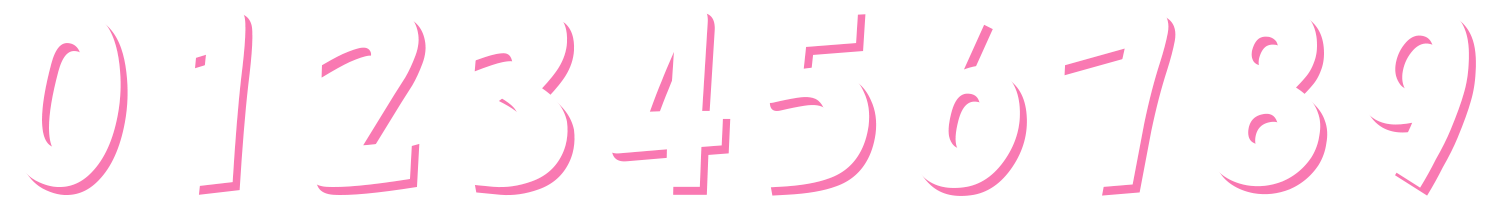
<style>
.page{position:relative;width:1500px;height:200px;background:#ffffff}
.page>*{position:absolute;margin:0}
.t1{font:200px "HGPSoeiKakupoptai";color:#ffffff}
</style>
<div class="page">
<p class="t1" style="left:6px;top:5px;width:115px;height:182px">0</p>
<p class="t1" style="left:188px;top:5px;width:58px;height:182px">1</p>
<p class="t1" style="left:308px;top:5px;width:111px;height:182px">2</p>
<p class="t1" style="left:604px;top:4px;width:120px;height:183px">4</p>
<p class="t1" style="left:758px;top:6px;width:112px;height:182px">5</p>
<p class="t1" style="left:1206px;top:2px;width:115px;height:185px">8</p>
<p class="t1" style="left:1356px;top:2px;width:113px;height:186px">9</p>
<p class="t1" style="left:460px;top:8px;width:108px;height:180px">3</p>
<p class="t1" style="left:1064px;top:14px;width:112px;height:182px">7</p>
</div>
